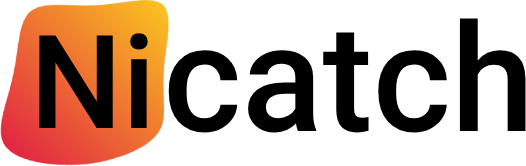
<style>
.page{position:relative;width:526px;height:166px;background:#ffffff}
.page>*{position:absolute;margin:0}
.t1{font:150px "Roboto-Medium";color:#000000}
.t2{font:130px "Roboto-Medium";color:#000000}
</style>
<div class="page">
<p class="t1" style="left:168px;top:18px;width:358px;height:115px">catch</p>
<p class="t2" style="left:39px;top:33px;width:109px;height:95px">Ni</p>
</div>
